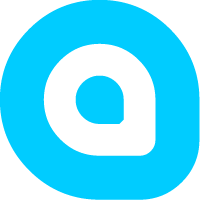
<style>
.page{position:relative;width:200px;height:200px;background:#00ccff}
.page>*{position:absolute;margin:0}
.t1{font:308px "PicoWhiteAl";color:#00ccff;font-weight:bold}
</style>
<div class="page">
<p class="t1" style="left:0px;top:0px;width:200px;height:200px">A</p>
</div>
